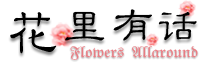
<style>
.page{position:relative;width:215px;height:63px;background:#ffffff}
.page>*{position:absolute;margin:0}
.t1{font:50.5px "HGLB_CNKI";letter-spacing:0.08em;color:#000000;scale:1.06 1}
.t2{font:39px "HGLB_CNKI";letter-spacing:0.08em;color:#000000;scale:1.13 1}
.t3{font:41.1px "HGLB_CNKI";letter-spacing:0.08em;color:#000000;scale:1.07 1}
.t4{font:39.9px "HGLB_CNKI";letter-spacing:0.08em;color:#000000}
.t5{font:14px "HGBD_CNKI";color:#ea7b82}
</style>
<div class="page">
<p class="t1" style="left:10px;top:12px;width:47px;height:42px">花</p>
<p class="t2" style="left:65px;top:11px;width:40px;height:30px">里</p>
<p class="t3" style="left:113px;top:9px;width:39px;height:32px">有</p>
<p class="t4" style="left:158px;top:11px;width:39px;height:30px">话</p>
<p class="t5" style="left:70px;top:46px;width:128px;height:14px">Flowers  Allaround</p>
</div>
